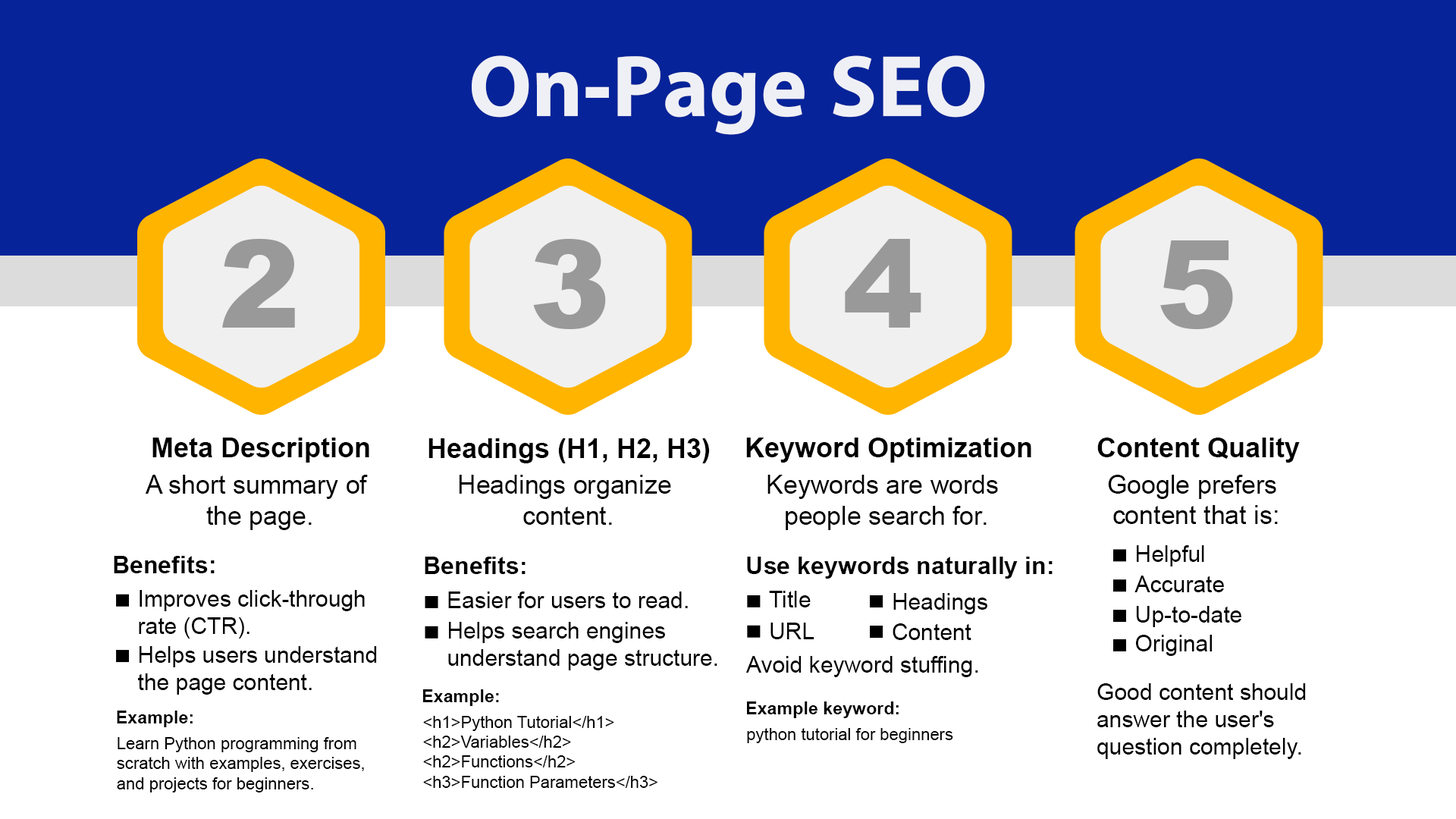
<style>
.page{position:relative;width:1456px;height:819px;background:#ffffff}
.page>*{position:absolute;margin:0}
.t1{font:88px "iKampuchea001_O'Chrov";color:#ffffff}
.t2{font:121px "Arial-Black";color:#999999}
.t3{font:27.3px "Arial-BoldMT";color:#000000}
.t4{font:25.8px "ArialMT";color:#000000}
.t5{font:25.7px "ArialMT";color:#000000}
.t6{font:22.7px "ArialMT";color:#000000}
.t7{font:24.3px "Arial-BoldMT";color:#000000}
.t8{font:24.2px "Arial-BoldMT";color:#000000}
.t9{font:23.8px "Arial-BoldMT";color:#000000}
.t10{font:22.8px "ArialMT";color:#000000}
.t11{font:22.6px "ArialMT";color:#000000}
.t12{font:17.6px "Arial-BoldMT";color:#000000}
.t13{font:17.7px "Arial-BoldMT";color:#000000}
.t14{font:16.7px "ArialMT";color:#000000}
.t15{font:16.8px "ArialMT";color:#000000}
</style>
<div class="page">
<p class="t1" style="left:472px;top:55px;width:513px;height:80px;opacity:0.9">On-Page SEO</p>
<p class="t2" style="left:222px;top:239px;width:73px;height:89px">2</p>
<p class="t2" style="left:533px;top:239px;width:73px;height:90px">3</p>
<p class="t2" style="left:845px;top:239px;width:76px;height:89px">4</p>
<p class="t2" style="left:1160px;top:240px;width:73px;height:89px">5</p>
<p class="t3" style="left:152px;top:438px;width:217px;height:25px">Meta Description</p>
<p class="t3" style="left:746px;top:438px;width:285px;height:25px">Keyword Optimization</p>
<p class="t3" style="left:1097px;top:438px;width:203px;height:25px">Content Quality</p>
<p class="t3" style="left:428px;top:438px;width:282px;height:25px">Headings (H1, H2, H3)</p>
<p class="t4" style="left:145px;top:475px;width:223px;height:55px;text-align:center">A short summary of <br>the page.</p>
<p class="t4" style="left:459px;top:475px;width:212px;height:50px;text-align:center">Headings organize <br>content.</p>
<p class="t5" style="left:767px;top:475px;width:231px;height:55px;text-align:center">Keywords are words <br>people search for.</p>
<p class="t5" style="left:1108px;top:475px;width:170px;height:49px;text-align:center">Google prefers <br>content that is:</p>
<p class="t6" style="left:1137px;top:545px;width:67px;height:21px">Helpful</p>
<p class="t7" style="left:114px;top:556px;width:101px;height:17px">Benefits:</p>
<p class="t8" style="left:425px;top:557px;width:101px;height:17px">Benefits<span class="t9">:</span></p>
<p class="t8" style="left:747px;top:557px;width:306px;height:22px">Use keywords naturally in:</p>
<p class="t6" style="left:1134px;top:576px;width:90px;height:16px">Accurate</p>
<p class="t10" style="left:139px;top:590px;width:226px;height:49px">Improves click-through <br>rate (CTR).</p>
<p class="t6" style="left:448px;top:591px;width:240px;height:17px">Easier for users to read.</p>
<p class="t11" style="left:769px;top:591px;width:42px;height:16px">Title</p>
<p class="t10" style="left:893px;top:593px;width:94px;height:21px">Headings</p>
<p class="t6" style="left:1136px;top:606px;width:105px;height:21px">Up-to-date</p>
<p class="t10" style="left:448px;top:622px;width:269px;height:48px">Helps search engines <br>understand page structure.</p>
<p class="t6" style="left:770px;top:623px;width:44px;height:16px">URL</p>
<p class="t10" style="left:893px;top:623px;width:78px;height:17px">Content</p>
<p class="t6" style="left:1136px;top:635px;width:76px;height:21px">Original</p>
<p class="t10" style="left:138px;top:646px;width:239px;height:49px">Helps users understand <br>the page content.</p>
<p class="t10" style="left:745px;top:656px;width:233px;height:21px">Avoid keyword stuffing.</p>
<p class="t12" style="left:423px;top:689px;width:76px;height:17px">Example:</p>
<p class="t10" style="left:1097px;top:683px;width:209px;height:76px">Good content should <br>answer the user's <br>question completely.</p>
<p class="t13" style="left:747px;top:701px;width:152px;height:17px">Example keyword:</p>
<p class="t12" style="left:117px;top:711px;width:76px;height:16px">Example:</p>
<p class="t14" style="left:423px;top:716px;width:234px;height:72px">&lt;h1&gt;Python Tutorial&lt;/h1&gt;<br>&lt;h2&gt;Variables&lt;/h2&gt;<br>&lt;h2&gt;Functions&lt;/h2&gt;<br>&lt;h3&gt;Function Parameters&lt;/h3&gt;</p>
<p class="t14" style="left:117px;top:737px;width:247px;height:55px">Learn Python programming from <br>scratch with examples, exercises, <br>and projects for beginners.</p>
<p class="t15" style="left:747px;top:728px;width:206px;height:15px">python tutorial for beginners</p>
</div>
